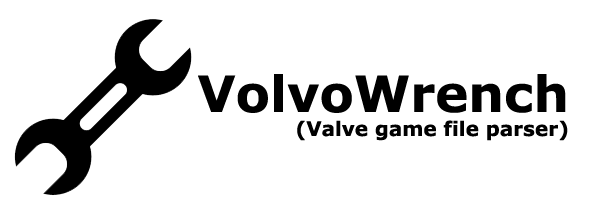
<style>
.page{position:relative;width:600px;height:200px;background:#ffffff}
.page>*{position:absolute;margin:0}
.t1{font:20px "Verdana-Bold";color:#000000}
.t2{font:50px "Verdana-Bold";color:#000000}
</style>
<div class="page">
<p class="t1" style="left:198px;top:74px;width:370px;height:67px;text-align:right"><span class="t2">VolvoWrench<br></span>(Valve game file parser)</p>
</div>
